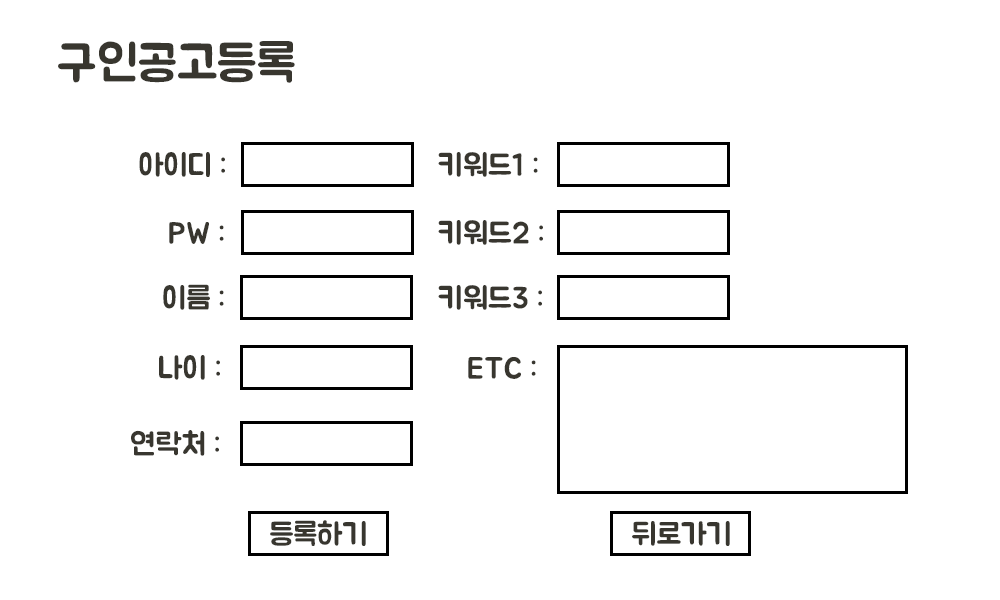
<style>
.page{position:relative;width:1000px;height:600px;background:#ffffff}
.page>*{position:absolute;margin:0}
.t1{font:50px "BMJUA";color:#38362f}
.t2{font:30.6px "BMJUA";color:#38362f}
</style>
<div class="page">
<p class="t1" style="left:58px;top:41px;width:237px;height:42px">구인공고등록</p>
<p class="t2" style="left:139px;top:152px;width:86px;height:25px">아이디 :</p>
<p class="t2" style="left:438px;top:152px;width:100px;height:25px">키워드1 :</p>
<p class="t2" style="left:169px;top:222px;width:55px;height:22px">PW :</p>
<p class="t2" style="left:438px;top:220px;width:105px;height:25px">키워드2 :</p>
<p class="t2" style="left:163px;top:284px;width:61px;height:26px">이름 :</p>
<p class="t2" style="left:438px;top:285px;width:104px;height:25px">키워드3 :</p>
<p class="t2" style="left:159px;top:355px;width:61px;height:25px">나이 :</p>
<p class="t2" style="left:468px;top:357px;width:68px;height:22px">ETC :</p>
<p class="t2" style="left:131px;top:430px;width:88px;height:26px">연락처 :</p>
<p class="t2" style="left:270px;top:520px;width:96px;height:26px">등록하기</p>
<p class="t2" style="left:632px;top:521px;width:98px;height:25px">뒤로가기</p>
</div>
